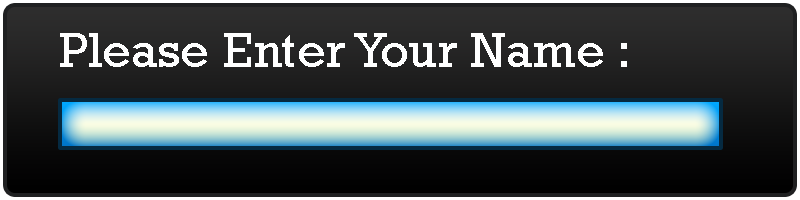
<style>
.page{position:relative;width:800px;height:200px}
.page>*{position:absolute;margin:0}
.t1{font:50px "Rockwell";color:#ffffff}
</style>
<div class="page">
<p class="t1" style="left:60px;top:33px;width:567px;height:34px">Please Enter Your Name :</p>
</div>
